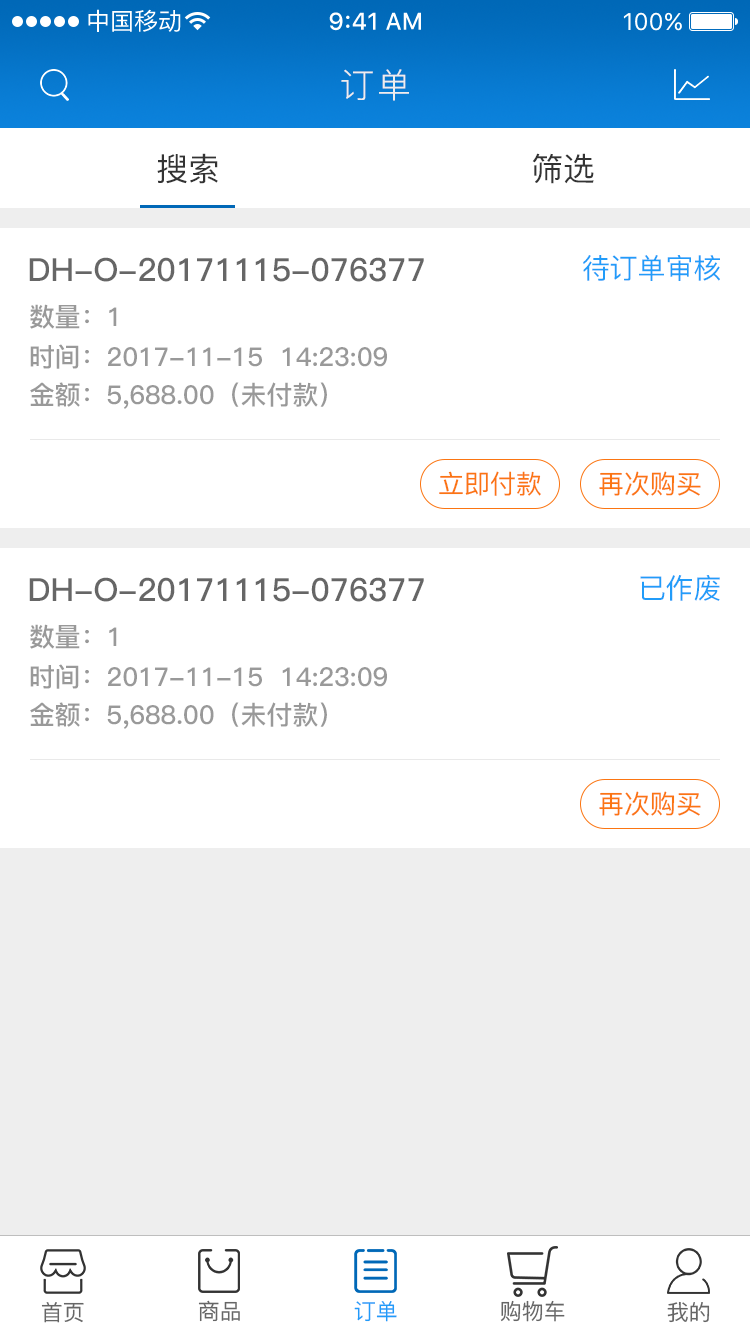
<style>
.page{position:relative;width:750px;height:1334px;background:#ffffff}
.page>*{position:absolute;margin:0}
.t1{font:34px "PingFang-SC-Regular";letter-spacing:0.06em;color:#eeeeee}
.t2{font:32px "PingFang-SC-Medium";color:#333333}
.t3{font:32px "PingFang-SC-Bold";color:#666666}
.t4{font:28px "PingFang-SC-Medium";color:#219cf9}
.t5{font:26px "PingFang-SC-Bold";color:#999999}
.t6{font:26px "PingFang-SC-Medium";color:#fb7512}
.t7{font:22px "PingFang-SC-Medium";color:#666666}
.t8{font:22px "PingFang-SC-Medium";color:#219cf9}
</style>
<div class="page">
<p class="t1" style="left:341px;top:69px;width:68px;height:32px">订单</p>
<p class="t2" style="left:157px;top:153px;width:61px;height:31px">搜索</p>
<p class="t2" style="left:532px;top:153px;width:62px;height:31px">筛选</p>
<p class="t3" style="left:29px;top:257px;width:395px;height:25px">DH-O-20171115-076377</p>
<p class="t4" style="left:583px;top:255px;width:137px;height:26px">待订单审核</p>
<p class="t5" style="left:30px;top:304px;width:87px;height:25px">数量：1</p>
<p class="t5" style="left:30px;top:344px;width:357px;height:25px">时间：2017-11-15  14:23:09</p>
<p class="t5" style="left:30px;top:382px;width:297px;height:27px">金额：5,688.00（未付款）</p>
<p class="t6" style="left:439px;top:471px;width:102px;height:25px">立即付款</p>
<p class="t6" style="left:599px;top:471px;width:102px;height:25px">再次购买</p>
<p class="t3" style="left:29px;top:577px;width:395px;height:25px">DH-O-20171115-076377</p>
<p class="t4" style="left:640px;top:575px;width:80px;height:26px">已作废</p>
<p class="t5" style="left:30px;top:624px;width:87px;height:25px">数量：1</p>
<p class="t5" style="left:30px;top:664px;width:357px;height:25px">时间：2017-11-15  14:23:09</p>
<p class="t5" style="left:30px;top:702px;width:297px;height:27px">金额：5,688.00（未付款）</p>
<p class="t6" style="left:599px;top:791px;width:102px;height:25px">再次购买</p>
<p class="t7" style="left:41px;top:1302px;width:43px;height:21px">首页</p>
<p class="t7" style="left:198px;top:1300px;width:42px;height:22px">商品</p>
<p class="t8" style="left:354px;top:1301px;width:43px;height:21px">订单</p>
<p class="t7" style="left:500px;top:1300px;width:65px;height:22px">购物车</p>
<p class="t7" style="left:667px;top:1301px;width:43px;height:22px">我的</p>
</div>
